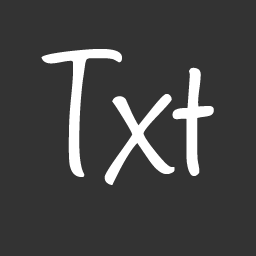
<style>
.page{position:relative;width:256px;height:256px;background:#333333}
.page>*{position:absolute;margin:0}
.t1{font:148px "Noteworthy-Light";color:#ffffff}
</style>
<div class="page">
<p class="t1" style="left:41px;top:49px;width:173px;height:136px">Txt</p>
</div>
